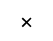
<style>
.page{position:relative;width:53px;height:41px;background:#ffffff}
.page>*{position:absolute;margin:0}
.t1{font:23.7px "DroidSans";color:#000000}
</style>
<div class="page">
<p class="t1" style="left:21px;top:17px;width:11px;height:11px">×</p>
</div>
